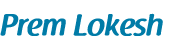
<style>
.page{position:relative;width:180px;height:36px;background:#ffffff}
.page>*{position:absolute;margin:0}
.t1{font:30.4px "RaspoutineDemiBold";color:#007ba7}
</style>
<div class="page">
<p class="t1" style="left:0px;top:13px;width:163px;height:24px">Prem Lokesh</p>
</div>
